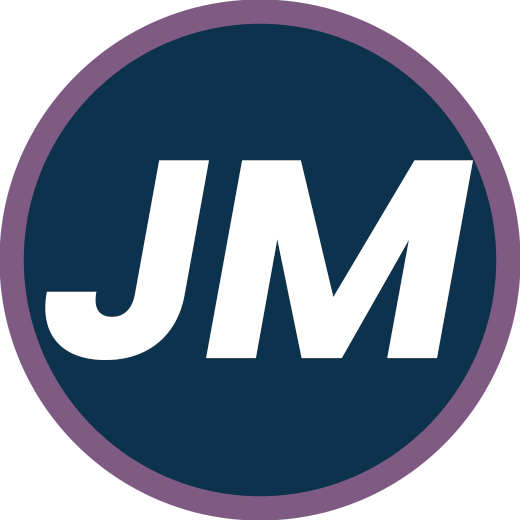
<style>
.page{position:relative;width:520px;height:520px;background:#0d324d}
.page>*{position:absolute;margin:0}
.t1{font:281.5px "Poppins-BoldItalic";letter-spacing:-0.025em;color:#ffffff;scale:1.03 1}
</style>
<div class="page">
<p class="t1" style="left:45px;top:160px;width:428px;height:200px">JM</p>
</div>
